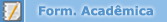
<style>
.page{position:relative;width:167px;height:22px;background:#8fbee8}
.page>*{position:absolute;margin:0}
.t1{font:12px "Verdana-Bold";color:#5292cc}
</style>
<div class="page">
<p class="t1" style="left:39px;top:5px;width:114px;height:11px">Form. Acadêmica</p>
</div>
